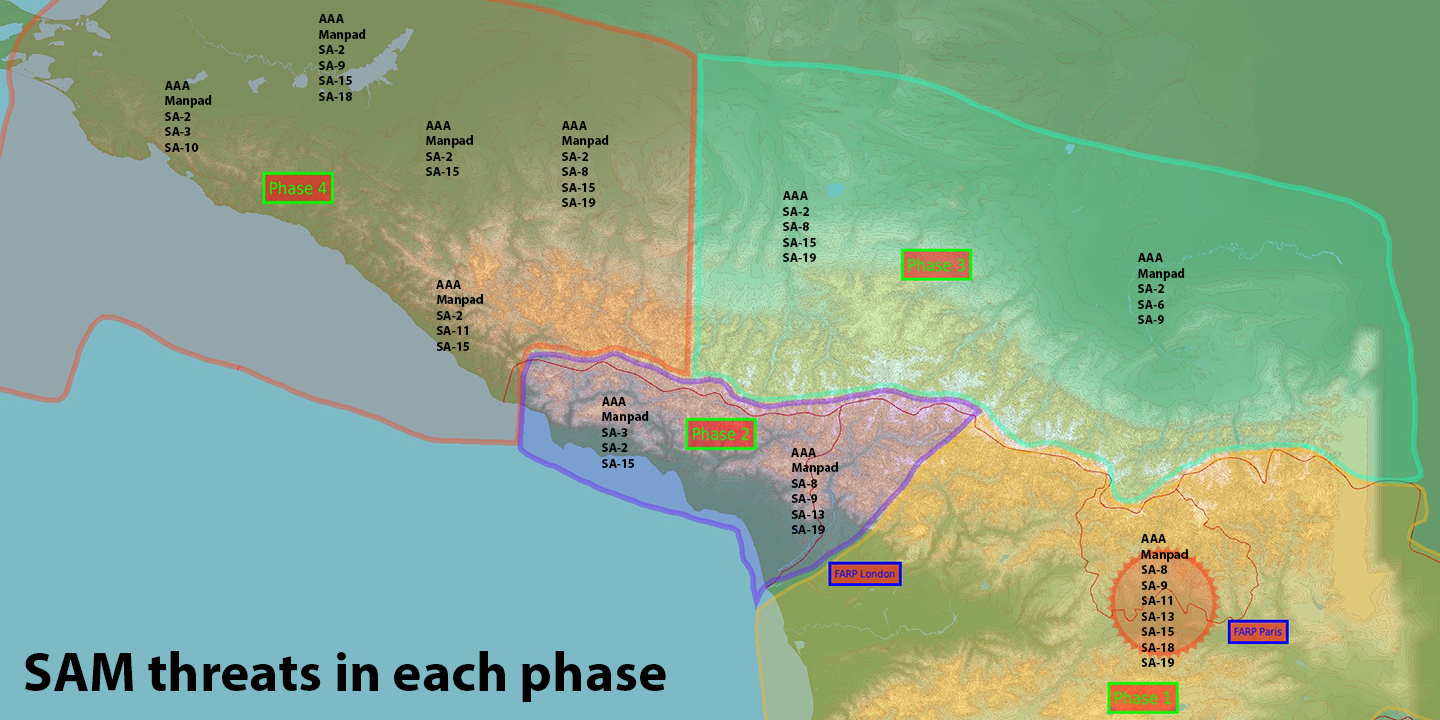
<style>
.page{position:relative;width:1440px;height:720px}
.page>*{position:absolute;margin:0}
.t1{font:12.9px "MyriadPro-Bold";color:#000000}
.t2{font:55.3px "MyriadPro-Bold";color:#000000}
</style>
<div class="page">
<p class="t1" style="left:319px;top:14px;width:47px;height:87px">AAA<br>Manpad<br>SA-2<br>SA-9<br>SA-15<br>SA-18</p>
<p class="t1" style="left:165px;top:81px;width:47px;height:71px">AAA<br>Manpad<br>SA-2<br>SA-3<br>SA-10</p>
<p class="t1" style="left:426px;top:121px;width:47px;height:55px">AAA<br>Manpad<br>SA-2<br>SA-15</p>
<p class="t1" style="left:562px;top:121px;width:47px;height:86px">AAA<br>Manpad<br>SA-2<br>SA-8<br>SA-15<br>SA-19</p>
<p class="t1" style="left:783px;top:191px;width:33px;height:71px">AAA<br>SA-2<br>SA-8<br>SA-15<br>SA-19</p>
<p class="t1" style="left:1138px;top:253px;width:47px;height:71px">AAA<br>Manpad<br>SA-2<br>SA-6<br>SA-9</p>
<p class="t1" style="left:436px;top:280px;width:47px;height:71px">AAA<br>Manpad<br>SA-2<br>SA-11<br>SA-15</p>
<p class="t1" style="left:602px;top:397px;width:47px;height:71px">AAA<br>Manpad<br>SA-3<br>SA-2<br>SA-15</p>
<p class="t1" style="left:791px;top:448px;width:47px;height:86px">AAA<br>Manpad<br>SA-8<br>SA-9<br>SA-13<br>SA-19</p>
<p class="t1" style="left:1141px;top:534px;width:47px;height:133px">AAA<br>Manpad<br>SA-8<br>SA-9<br>SA-11<br>SA-13<br>SA-15<br>SA-18<br>SA-19</p>
<p class="t2" style="left:25px;top:651px;width:641px;height:51px">SAM threats in each phase</p>
</div>
